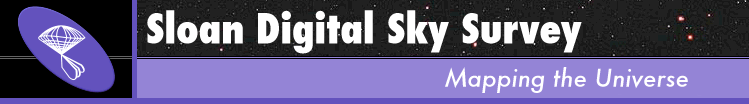
<style>
.page{position:relative;width:749px;height:104px;background:#9484d6}
.page>*{position:absolute;margin:0}
.t1{font:40.5px "Futura-CondensedExtraBold";color:#ffffff}
.t2{font:24px "Futura-MediumItalic";color:#ffffff}
</style>
<div class="page">
<p class="t1" style="left:147px;top:10px;width:435px;height:44px">Sloan Digital Sky Survey</p>
<p class="t2" style="left:445px;top:67px;width:243px;height:26px">Mapping the Universe</p>
</div>
